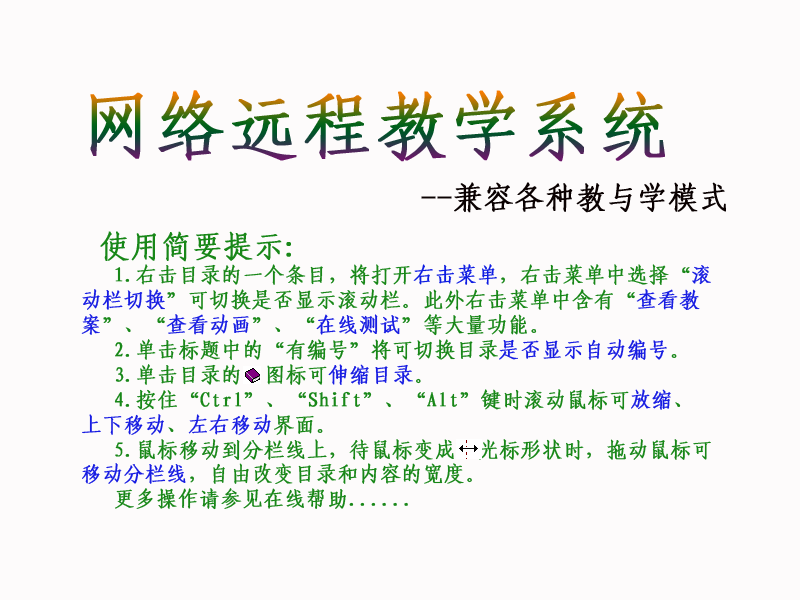
<style>
.page{position:relative;width:800px;height:600px;background:#fdfbfb}
.page>*{position:absolute;margin:0}
.t1{font:72px "FangSong_GB2312";font-weight:bold}
.t2{font:30px "FangSong_GB2312";color:#0a0101;font-weight:bold}
.t3{font:20.8px "FangSong_GB2312";color:#188718;font-weight:bold}
.t4{font:36px "FangSong_GB2312";color:#188718;font-weight:bold}
.t5{font:30px "FangSong_GB2312";color:#188718;font-weight:bold}
.t6{font:20.8px "FangSong_GB2312";color:#0e1de2;font-weight:bold}
.t7{font:20.8px "FangSong_GB2312";color:#181de2;font-weight:bold}
</style>
<div class="page">
<p class="t1" style="left:90px;top:90px;width:575px;height:72px">网络远程教学系统</p>
<p class="t2" style="left:421px;top:182px;width:305px;height:31px">--兼容各种教与学模式</p>
<p class="t3" style="left:81px;top:231px;width:630px;height:279px"><span class="t4"> </span><span class="t5">使用简要提示:<br></span>   1.右击目录的一个条目，将打开<span class="t6">右击菜单</span>，右击菜单中选择“<span class="t7">滚动栏切换</span>”可切换是否显示滚动栏。此外右击菜单中含有“<span class="t7">查看教案</span>”、“<span class="t7">查看动画</span>”、“<span class="t7">在线测试</span>”等大量功能。<br>   2.单击标题中的“有编号”将可切换目录<span class="t7">是否显示自动编号</span>。<br>   3.单击目录的  图标可<span class="t7">伸缩目录</span>。<br>   4.按住“Ctrl”、“Shift”、“Alt”键时滚动鼠标可<span class="t7">放缩</span>、<span class="t7">上下移动</span>、<span class="t7">左右移动</span>界面。  <br>   5.鼠标移动到分栏线上，待鼠标变成  光标形状时，拖动鼠标可<span class="t7">移动分栏线</span>，自由改变目录和内容的宽度。<br>   更多操作请参见在线帮助......</p>
</div>
